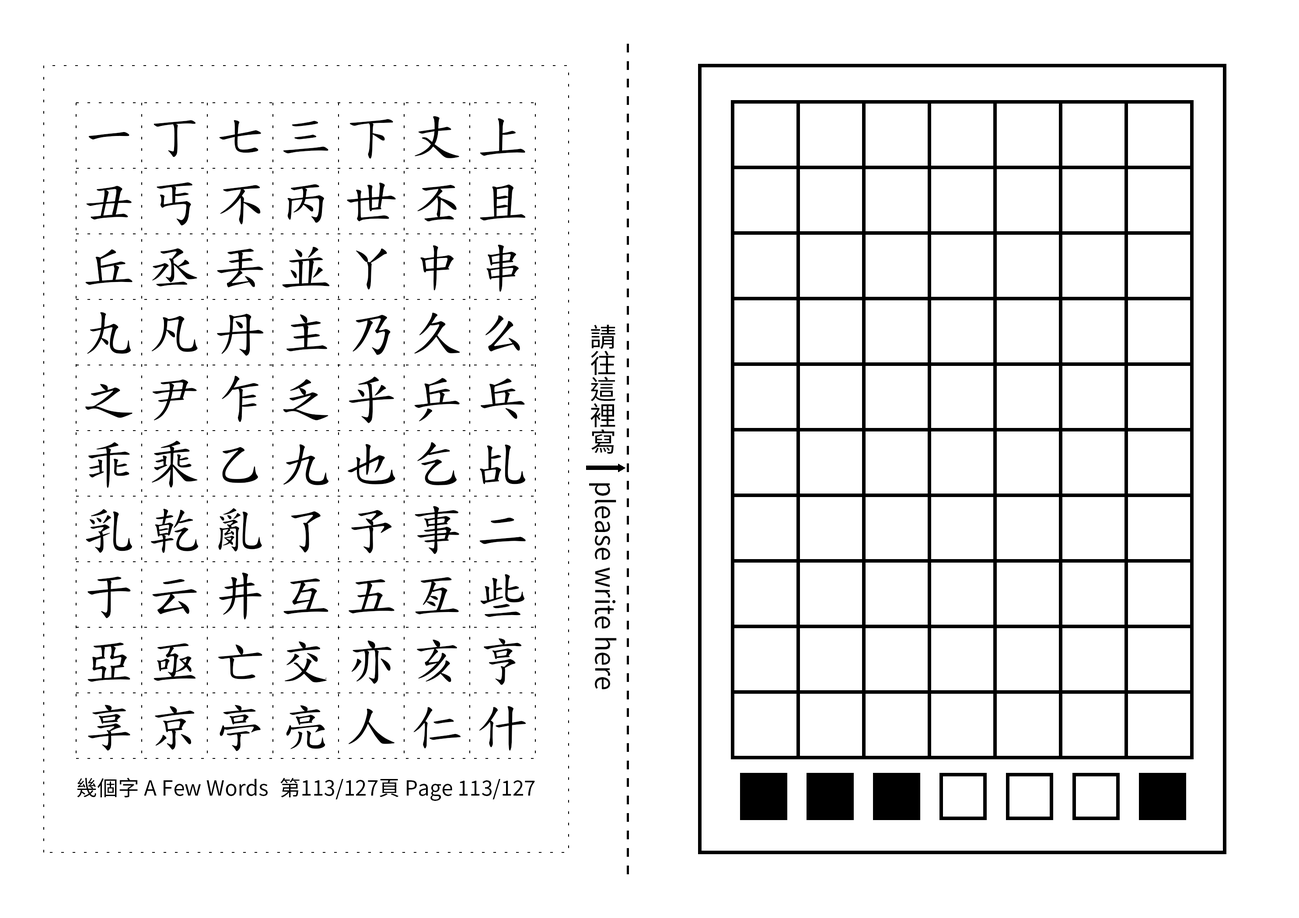
<style>
.page{position:relative;width:1299px;height:918px;background:#ffffff}
.page>*{position:absolute;margin:0}
.t1{font:52.5px/65.6px "TW-Kai-98_1";letter-spacing:0.25em;color:#000000}
.t2{font:26.2px "SourceHanSansTC-Regular";color:#000000}
.t3{font:21px "SourceHanSansTC-Regular";color:#000000}
</style>
<div class="page">
<p class="t1" style="left:85px;top:116px;width:441px;height:636px;text-align:center">一丁七三下丈上丑丐不丙世丕且丘丞丟並丫中串丸凡丹主乃久么之尹乍乏乎乒乓乖乘乙九也乞乩乳乾亂了予事二于云井互五亙些亞亟亡交亦亥亨享京亭亮人仁什</p>
<p class="t2" style="left:589px;top:324px;width:28px;height:366px;text-align:center">請往這裡寫　please write here</p>
<p class="t3" style="left:77px;top:778px;width:191px;height:20px">幾個字 A Few Words</p>
<p class="t3" style="left:280px;top:778px;width:255px;height:23px">第113/127頁 Page 113/127</p>
</div>
